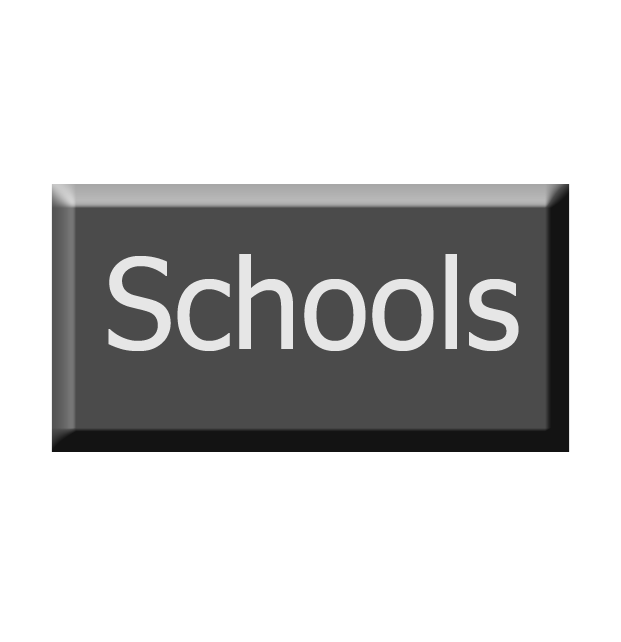
<style>
.page{position:relative;width:621px;height:642px;background:#ffffff}
.page>*{position:absolute;margin:0}
.t1{font:125.1px "Tahoma";color:#e6e6e6}
</style>
<div class="page">
<p class="t1" style="left:108px;top:254px;width:411px;height:97px">Schools</p>
</div>
